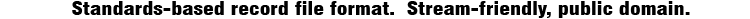
<style>
.page{position:relative;width:750px;height:19px;background:#ffffff}
.page>*{position:absolute;margin:0}
.t1{font:18px "Swiss721BT-BlackCondensed";color:#000000;scale:1.2 1}
</style>
<div class="page">
<p class="t1" style="left:72px;top:1px;width:618px;height:17px">Standards-based record file format.  Stream-friendly, public domain.</p>
</div>
